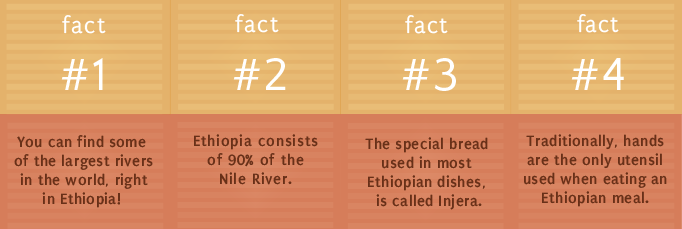
<style>
.page{position:relative;width:682px;height:229px}
.page>*{position:absolute;margin:0}
.t1{font:24px "Puritan2";letter-spacing:0.05em;color:#ffffff}
.t2{font:48px "QuattrocentoSans";letter-spacing:0.05em;color:#ffffff}
.t3{font:24px "Puritan2";letter-spacing:0.025em;color:#ffffff}
.t4{font:48px "QuattrocentoSans";letter-spacing:0.025em;color:#ffffff}
.t5{font:16px "Puritan2Bold";letter-spacing:0.025em;color:#683018}
.t6{font:16px "Puritan2Bold";letter-spacing:0.05em;color:#683018}
</style>
<div class="page">
<p class="t1" style="left:61px;top:15px;width:45px;height:75px;text-align:center">fact <br><span class="t2">#1</span></p>
<p class="t1" style="left:233px;top:14px;width:53px;height:76px;text-align:center">fact<br> <span class="t2">#2</span></p>
<p class="t1" style="left:402px;top:15px;width:54px;height:76px;text-align:center">fact<br> <span class="t2">#3</span></p>
<p class="t3" style="left:571px;top:14px;width:53px;height:76px;text-align:center">fact <br><span class="t2">#</span><span class="t4">4</span></p>
<p class="t5" style="left:14px;top:135px;width:139px;height:73px;text-align:center">You can find some<br> of the largest rivers<br> in the world, right <br>in Ethiopia!</p>
<p class="t6" style="left:194px;top:134px;width:124px;height:51px;text-align:center">Ethiopia consists <br>of 90% of the <br>Nile River.</p>
<p class="t5" style="left:365px;top:137px;width:123px;height:73px;text-align:center">The special bread <br>used in most <br>Ethiopian dishes,<br> is called Injera.</p>
<p class="t5" style="left:524px;top:134px;width:143px;height:73px;text-align:center">Traditionally, hands <br>are the only utensil <br>used when eating an Ethiopian meal.</p>
</div>
